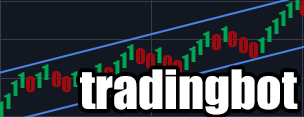
<style>
.page{position:relative;width:304px;height:117px;background:#131722}
.page>*{position:absolute;margin:0}
.t1{font:50px "Impact";color:#ffffff}
</style>
<div class="page">
<p class="t1" style="left:80px;top:69px;width:218px;height:46px">tradingbot</p>
</div>
